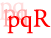
<style>
.page{position:relative;width:51px;height:38px;background:#ffffff}
.page>*{position:absolute;margin:0}
.t1{font:25.5px "AGaramondPro-Regular";color:#ff0000}
</style>
<div class="page">
<p class="t1" style="left:7px;top:9px;width:44px;height:25px">pqR</p>
</div>
